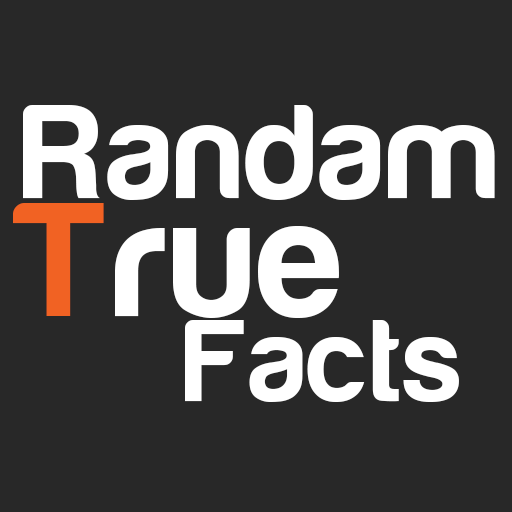
<style>
.page{position:relative;width:512px;height:512px;background:#282828}
.page>*{position:absolute;margin:0}
.t1{font:137.8px "Harabara";letter-spacing:0.04em;color:#ffffff}
.t2{font:169.4px "Harabara";letter-spacing:0.04em;color:#ffffff}
.t3{font:169.4px "Harabara";letter-spacing:0.04em;color:#f16223}
.t4{font:119.7px "Harabara";letter-spacing:0.04em;color:#ffffff}
</style>
<div class="page">
<p class="t1" style="left:23px;top:105px;width:472px;height:95px">Randam</p>
<p class="t2" style="left:13px;top:203px;width:326px;height:115px"><span class="t3">T</span>rue</p>
<p class="t4" style="left:185px;top:320px;width:274px;height:82px">Facts</p>
</div>
